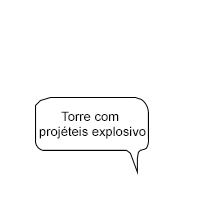
<style>
.page{position:relative;width:200px;height:200px;background:#ffffff}
.page>*{position:absolute;margin:0}
.t1{font:13px "ArialMT";color:#000000}
</style>
<div class="page">
<p class="t1" style="left:39px;top:111px;width:107px;height:28px;text-align:center">Torre com projéteis explosivo</p>
</div>
